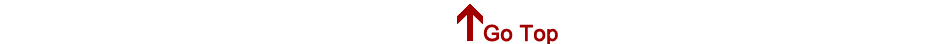
<style>
.page{position:relative;width:939px;height:44px;background:#ffffff}
.page>*{position:absolute;margin:0}
.t1{font:21.6px "ArialMT";color:#a10000;font-weight:bold}
</style>
<div class="page">
<p class="t1" style="left:483px;top:24px;width:75px;height:22px">Go Top</p>
</div>
